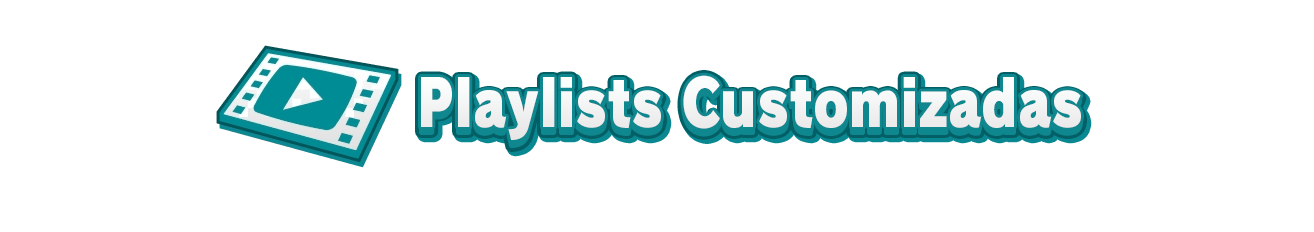
<style>
.page{position:relative;width:1314px;height:232px;background:#ffffff}
.page>*{position:absolute;margin:0}
.t1{font:69.6px "RodinPro-UB";color:#f0f0f1;scale:0.76 1}
.t2{font:64px "RodinPro-UB";color:#f2f3f3;scale:0.83 1}
</style>
<div class="page">
<p class="t1" style="left:421px;top:76px;width:660px;height:70px">Playlists Customizadas</p>
<p class="t2" style="left:421px;top:75px;width:660px;height:65px">Playlists Customizadas</p>
</div>
